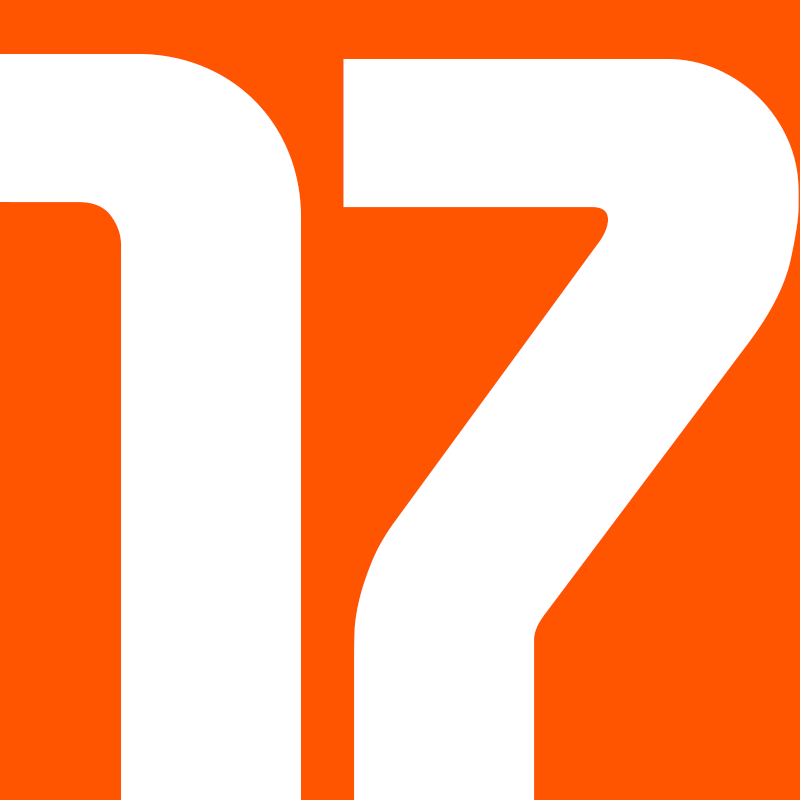
<style>
.page{position:relative;width:800px;height:800px;background:#ffffff}
.page>*{position:absolute;margin:0}
.t1{font:1058.3px "EASansCurves-Regular";color:#ffffff}
</style>
<div class="page">
<p class="t1" style="left:10px;top:54px;width:789px;height:746px">17</p>
</div>
